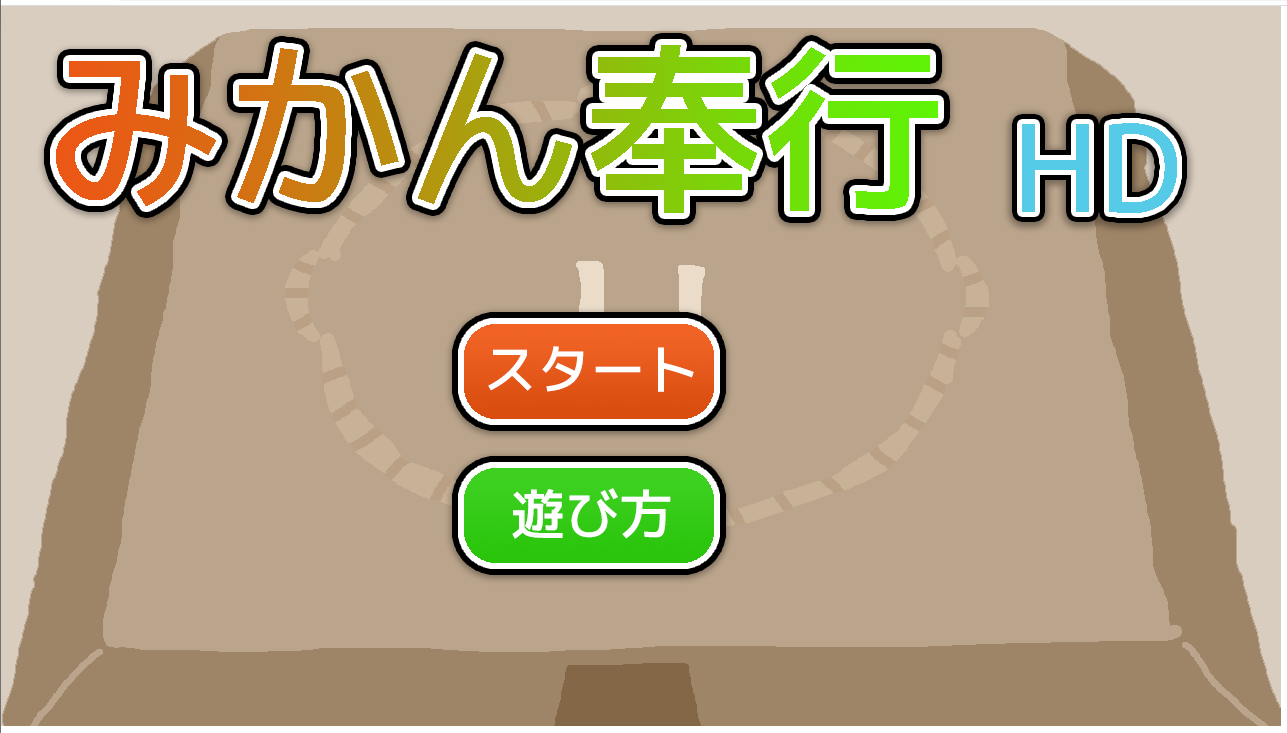
<style>
.page{position:relative;width:1287px;height:733px;background:#baa48b}
.page>*{position:absolute;margin:0}
.t1{font:120px "mplus-1p-medium";color:#56cbe8}
.t2{font:54px "mplus-1p-medium";color:#ffffff}
</style>
<div class="page">
<p class="t1" style="left:1022px;top:123px;width:155px;height:90px">HD</p>
<p class="t2" style="left:488px;top:346px;width:206px;height:46px">スタート</p>
<p class="t2" style="left:512px;top:488px;width:159px;height:51px">遊び方</p>
</div>
